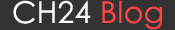
<style>
.page{position:relative;width:175px;height:30px;background:#333333}
.page>*{position:absolute;margin:0}
.t1{font:30px "CenturyGothic";letter-spacing:0.01em;color:#fefeff}
.t2{font:30px "CenturyGothic";letter-spacing:0.01em;color:#ff4444}
</style>
<div class="page">
<p class="t1" style="left:13px;top:0px;width:149px;height:30px">CH24 <span class="t2">Blog</span></p>
</div>
